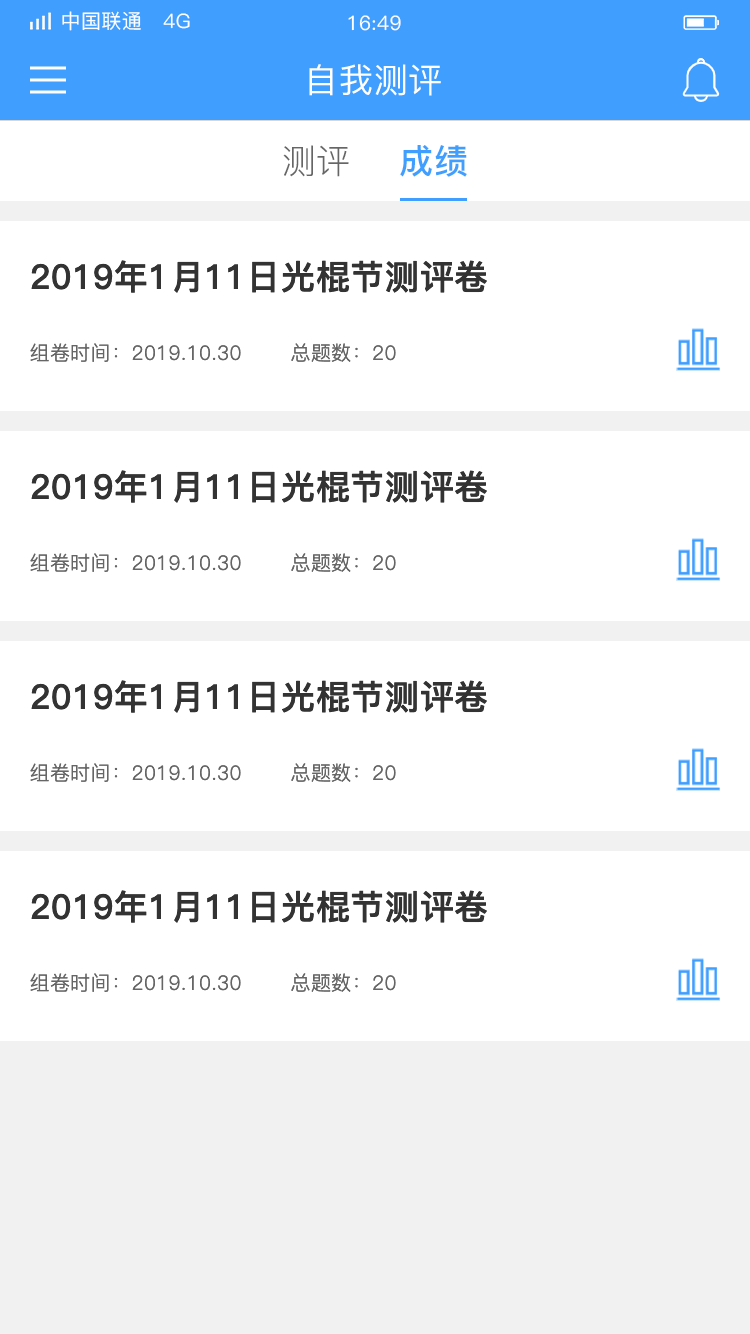
<style>
.page{position:relative;width:750px;height:1334px;background:#ffffff}
.page>*{position:absolute;margin:0}
.t1{font:20px "PingFang-SC-Medium";letter-spacing:0.02em;color:#ffffff}
.t2{font:34px "PingFang-SC-Medium";letter-spacing:0.02em;color:#ffffff}
.t3{font:34px "PingFang-SC-Regular";color:#666666}
.t4{font:34px "PingFang-SC-Bold";letter-spacing:0.02em;color:#409eff}
.t5{font:34px "PingFang-SC-Bold";letter-spacing:0.02em;color:#333333}
.t6{font:20px "PingFang-SC-Regular";letter-spacing:0.02em;color:#666666}
</style>
<div class="page">
<p class="t1" style="left:62px;top:11px;width:128px;height:20px">中国联通   4G</p>
<p class="t1" style="left:348px;top:15px;width:53px;height:16px">16:49</p>
<p class="t2" style="left:309px;top:64px;width:132px;height:32px">自我测评</p>
<p class="t3" style="left:283px;top:145px;width:66px;height:32px">测评</p>
<p class="t4" style="left:400px;top:145px;width:67px;height:32px">成绩</p>
<p class="t5" style="left:31px;top:260px;width:456px;height:33px">2019年1月11日光棍节测评卷</p>
<p class="t6" style="left:30px;top:343px;width:211px;height:19px">组卷时间：2019.10.30</p>
<p class="t6" style="left:291px;top:343px;width:105px;height:19px">总题数：20</p>
<p class="t5" style="left:31px;top:470px;width:456px;height:33px">2019年1月11日光棍节测评卷</p>
<p class="t6" style="left:30px;top:553px;width:211px;height:19px">组卷时间：2019.10.30</p>
<p class="t6" style="left:291px;top:553px;width:105px;height:19px">总题数：20</p>
<p class="t5" style="left:31px;top:680px;width:456px;height:33px">2019年1月11日光棍节测评卷</p>
<p class="t6" style="left:30px;top:763px;width:211px;height:19px">组卷时间：2019.10.30</p>
<p class="t6" style="left:291px;top:763px;width:105px;height:19px">总题数：20</p>
<p class="t5" style="left:31px;top:890px;width:456px;height:33px">2019年1月11日光棍节测评卷</p>
<p class="t6" style="left:30px;top:973px;width:211px;height:19px">组卷时间：2019.10.30</p>
<p class="t6" style="left:291px;top:973px;width:105px;height:19px">总题数：20</p>
</div>
